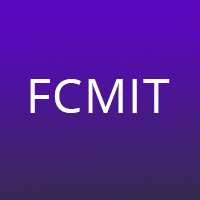
<style>
.page{position:relative;width:200px;height:200px}
.page>*{position:absolute;margin:0}
.t1{font:48px "OpenSans";letter-spacing:0.025em;color:#fefefe}
</style>
<div class="page">
<p class="t1" style="left:30px;top:79px;width:140px;height:34px">FCMIT</p>
</div>
